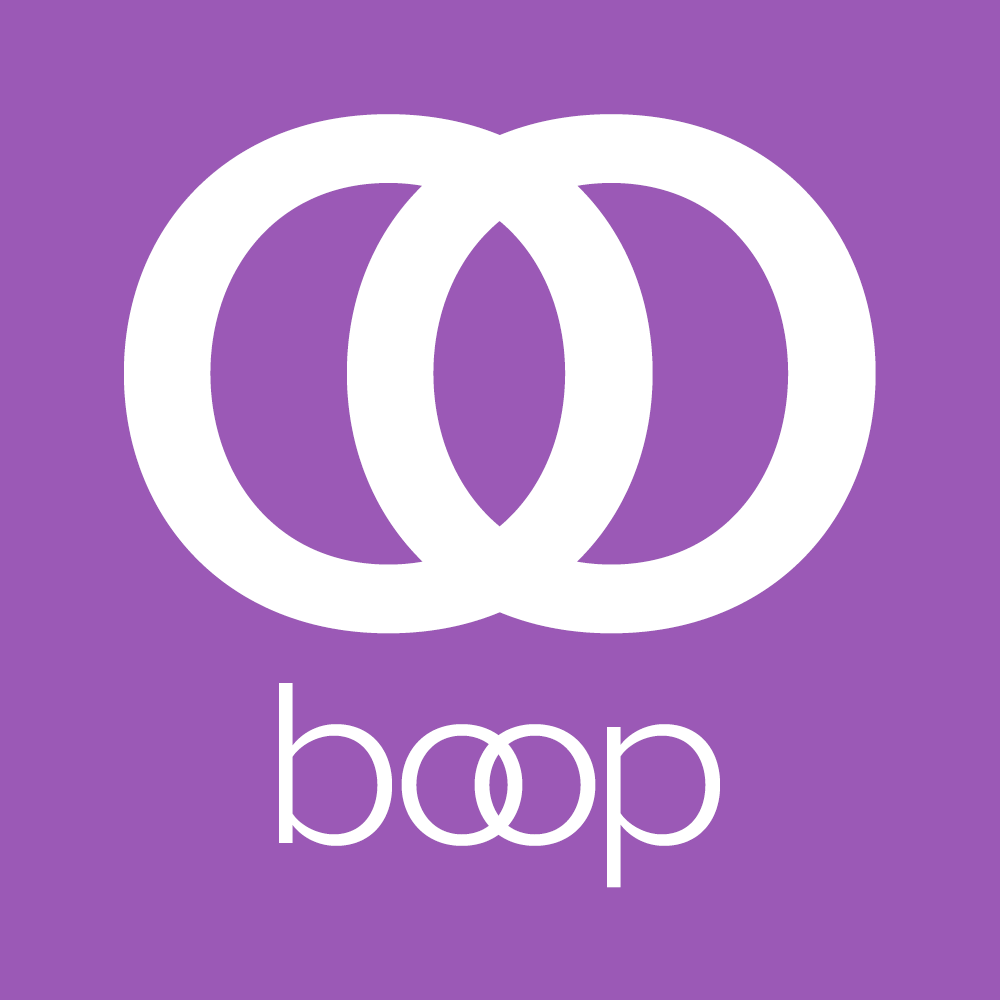
<style>
.page{position:relative;width:1000px;height:1000px;background:#9b59b6}
.page>*{position:absolute;margin:0}
.t1{font:1024px "ProximaNova-Regular";letter-spacing:-0.37em;color:#ffffff;scale:1.08 1}
.t2{font:240px "ProximaNova-Light";letter-spacing:-0.07em;color:#ffffff;scale:1.08 1}
.t3{font:240px "ProximaNova-Light";letter-spacing:-0.29em;color:#ffffff;scale:1.08 1}
.t4{font:240px "ProximaNova-Light";letter-spacing:-0.09em;color:#ffffff;scale:1.08 1}
.t5{font:240px "ProximaNova-Light";letter-spacing:-0.06em;color:#ffffff;scale:1.08 1}
</style>
<div class="page">
<p class="t1" style="left:124px;top:114px;width:752px;height:520px">oo</p>
<p class="t2" style="left:279px;top:683px;width:441px;height:205px">b<span class="t3">o</span><span class="t4">o</span><span class="t5">p</span></p>
</div>
